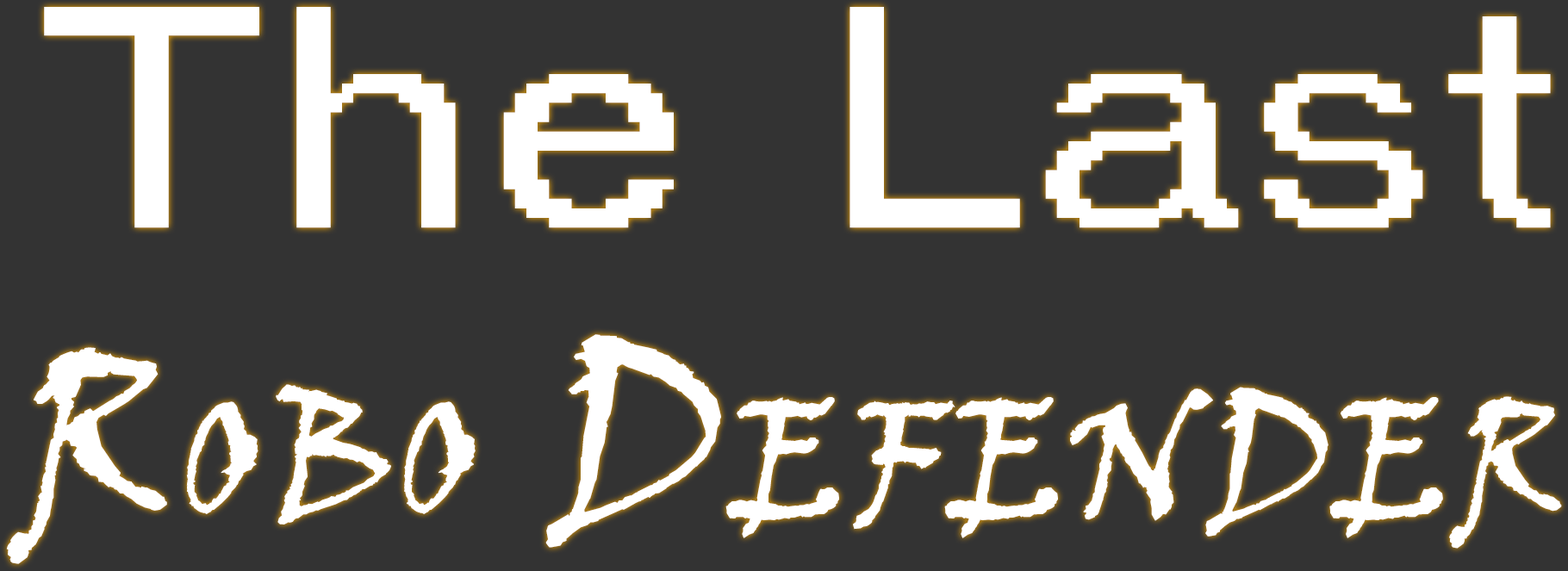
<style>
.page{position:relative;width:1568px;height:571px;background:#333333}
.page>*{position:absolute;margin:0}
.t1{font:236.6px "VinerHandITC";color:#ffffff;font-variant:small-caps;font-weight:bold}
.t2{font:307.2px "MS Sans Serif";letter-spacing:0.04em;color:#ffffff;scale:1.18 1}
</style>
<div class="page">
<p class="t1" style="left:6px;top:7px;width:1556px;height:557px;text-align:center"><span class="t2">The Last<br></span>Robo Defender</p>
</div>
